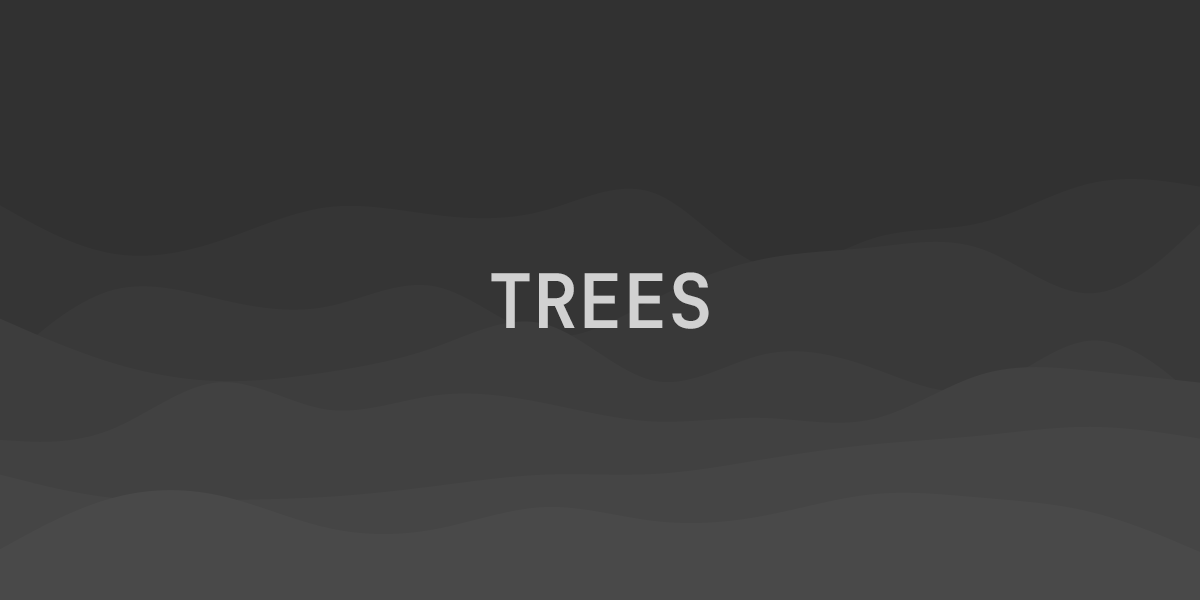
<style>
.page{position:relative;width:1200px;height:600px;background:#313131}
.page>*{position:absolute;margin:0}
.t1{font:75px "JetBrainsMono-SemiBold";color:#d1d1d1}
</style>
<div class="page">
<p class="t1" style="left:491px;top:272px;width:218px;height:57px">TREES</p>
</div>
